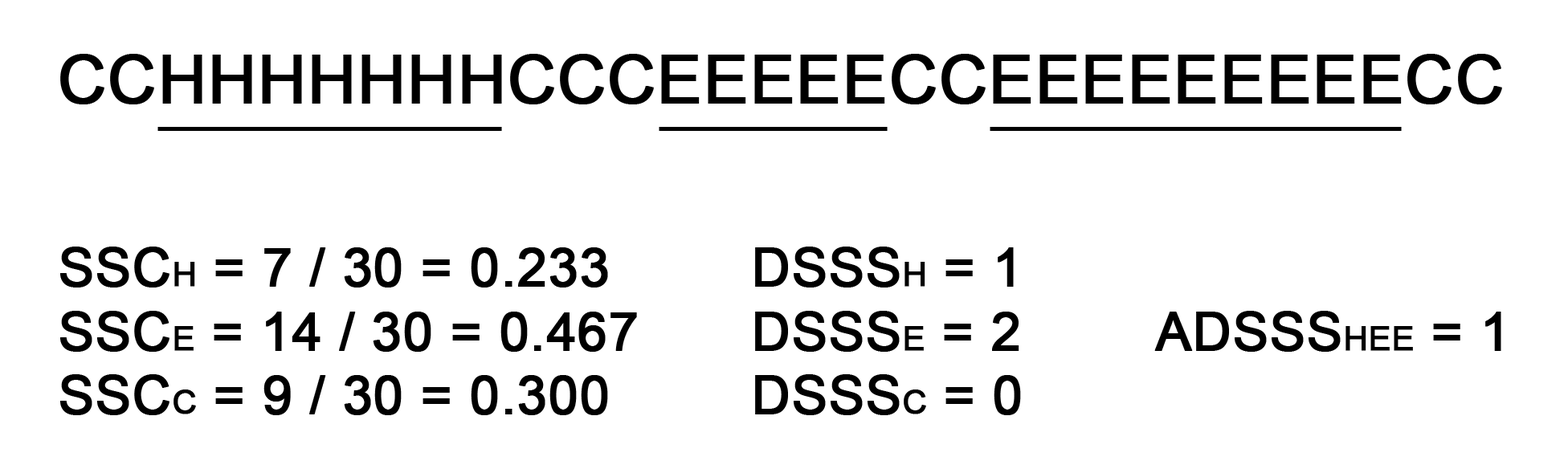
<style>
.page{position:relative;width:1568px;height:469px;background:#ffffff}
.page>*{position:absolute;margin:0}
.t1{font:66.7px "ArialMT";color:#000000;font-weight:bold}
.t2{font:53.4px "ArialMT";color:#000000;font-weight:bold}
.t3{font:33.3px "ArialMT";color:#000000;font-weight:bold}
</style>
<div class="page">
<p class="t1" style="left:60px;top:54px;width:1442px;height:50px">CCHHHHHHHCCCEEEEECCEEEEEEEEECC</p>
<p class="t2" style="left:60px;top:247px;width:577px;height:168px">SSC<span class="t3">H</span> = 7 / 30 = 0.233<br>SSC<span class="t3">E</span> = 14 / 30 = 0.467<br>SSC<span class="t3">C</span> = 9 / 30 = 0.300</p>
<p class="t2" style="left:755px;top:247px;width:266px;height:168px">DSSS<span class="t3">H</span> = 1<br>DSSS<span class="t3">E</span> = 2<br>DSSS<span class="t3">C</span> = 0</p>
<p class="t2" style="left:1154px;top:311px;width:347px;height:41px">ADSSS<span class="t3">HEE</span> = 1</p>
</div>
